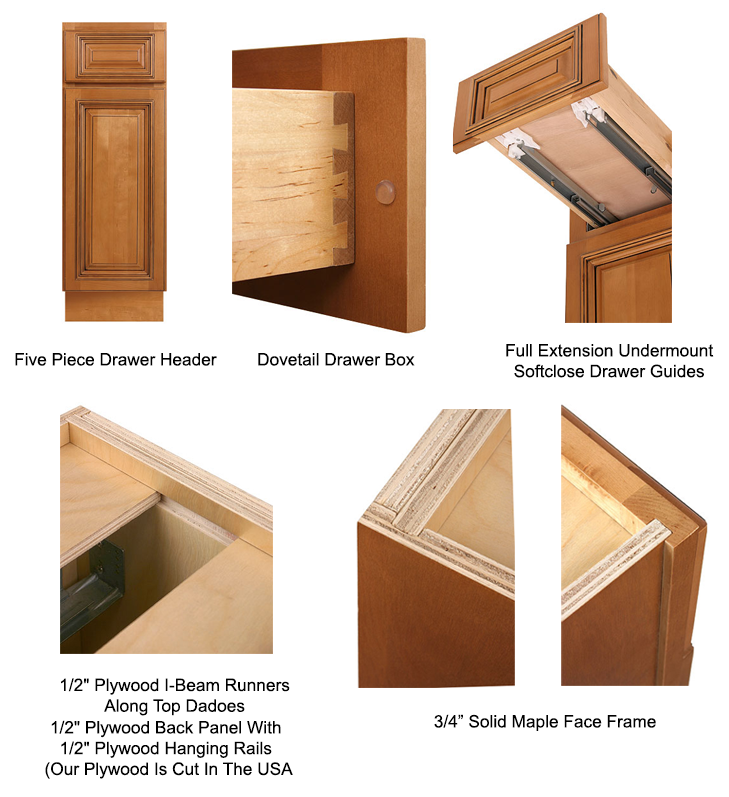
<style>
.page{position:relative;width:729px;height:797px;background:#ffffff}
.page>*{position:absolute;margin:0}
.t1{font:17.3px "ArialMT";color:#000000}
</style>
<div class="page">
<p class="t1" style="left:15px;top:353px;width:202px;height:13px">Five Piece Drawer Header</p>
<p class="t1" style="left:258px;top:353px;width:157px;height:13px">Dovetail Drawer Box</p>
<p class="t1" style="left:506px;top:344px;width:208px;height:34px;text-align:center">Full Extension Undermount<br>Softclose Drawer Guides</p>
<p class="t1" style="left:61px;top:678px;width:229px;height:38px;text-align:center">1/2" Plywood I-Beam Runners <br>Along Top Dadoes</p>
<p class="t1" style="left:45px;top:720px;width:248px;height:59px;text-align:center">1/2" Plywood Back Panel With <br>1/2" Plywood Hanging Rails <br>(Our Plywood Is Cut In The USA</p>
<p class="t1" style="left:434px;top:714px;width:222px;height:17px">3/4” Solid Maple Face Frame</p>
</div>
